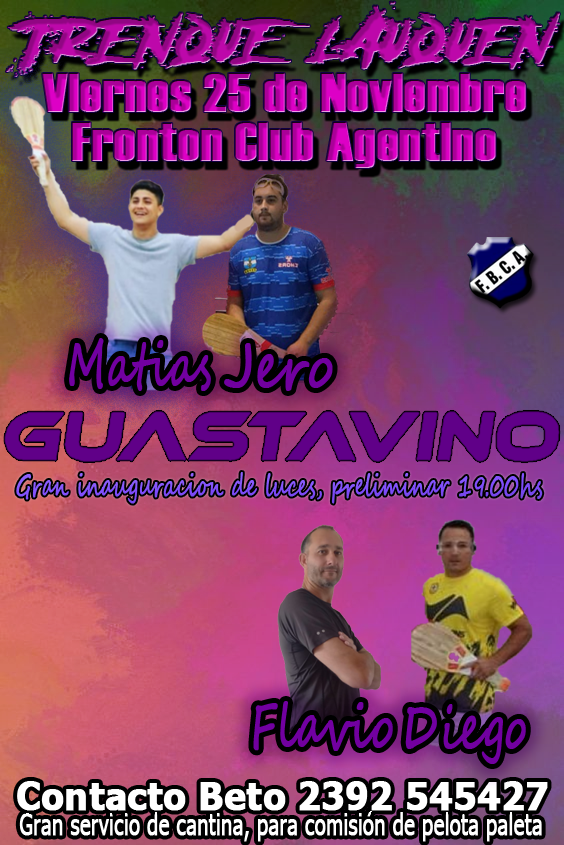
<style>
.page{position:relative;width:564px;height:845px}
.page>*{position:absolute;margin:0}
.t1{font:72.7px "ApocalypseGrunge";font-weight:bold}
.t2{font:72.7px "PindunkPersonalUse-Regular";font-weight:bold}
.t3{font:54.5px "Haettenschweiler";font-weight:bold;scale:1.08 1}
.t4{font:54.5px "PindunkPersonalUse-Regular";font-weight:bold;scale:1.08 1}
.t5{font:60.1px "SegoeScript";color:#7100a0;font-weight:bold;scale:0.64 1}
.t6{font:60.1px "SegoeScript";color:#7100a0;font-weight:bold;scale:0.81 1}
.t7{font:30px "SegoeScript";color:#8150fc;font-weight:bold;scale:0.64 1}
.t8{font:60.1px "SegoeScript";color:#7100a0;font-weight:bold;scale:0.7 1}
.t9{font:37.9px "Tahoma-Bold";color:#ffffff;font-weight:bold;scale:0.95 1}
.t10{font:30.3px "Tahoma";color:#ffffff;font-weight:bold;scale:0.66 1}
</style>
<div class="page">
<p class="t1" style="left:6px;top:1px;width:554px;height:76px"><span class="t2">     </span>TRENQUE LAUQUEN</p>
<p class="t3" style="left:42px;top:73px;width:484px;height:39px"><span class="t4">     </span>Viernes 25 de Noviembre</p>
<p class="t3" style="left:72px;top:122px;width:424px;height:46px"><span class="t4">     </span>Fronton Club Agentino</p>
<p class="t5" style="left:69px;top:338px;width:142px;height:53px">Matias</p>
<p class="t6" style="left:224px;top:343px;width:109px;height:48px">Jero</p>
<p class="t7" style="left:16px;top:472px;width:527px;height:32px">Gran inauguracion de luces, preliminar 19.00hs</p>
<p class="t8" style="left:253px;top:701px;width:140px;height:50px">Flavio</p>
<p class="t8" style="left:405px;top:704px;width:121px;height:60px">Diego</p>
<p class="t9" style="left:17px;top:781px;width:531px;height:30px">Contacto Beto 2392 545427</p>
<p class="t10" style="left:19px;top:811px;width:523px;height:31px">Gran servicio de cantina, para comisión de pelota paleta</p>
</div>
